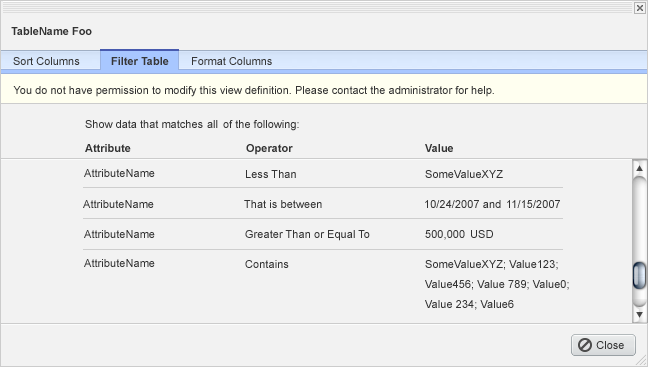
<style>
.page{position:relative;width:648px;height:367px;background:#f2f2f2}
.page>*{position:absolute;margin:0}
.t1{font:11px "Arial-BoldMT";color:#333333}
.t2{font:11px "ArialMT";color:#363636}
.t3{font:11px "Arial-BoldMT";color:#363636}
.t4{font:11px "ArialMT";color:#333333}
.t5{font:11px "ArialMT";letter-spacing:0.005em;color:#333333}
.t6{font:11px/20px "ArialMT";letter-spacing:0.005em;color:#333333}
</style>
<div class="page">
<p class="t1" style="left:11px;top:27px;width:81px;height:8px">TableName Foo</p>
<p class="t2" style="left:13px;top:57px;width:67px;height:8px">Sort Columns</p>
<p class="t3" style="left:111px;top:57px;width:58px;height:8px">Filter Table</p>
<p class="t2" style="left:192px;top:57px;width:80px;height:8px">Format Columns</p>
<p class="t4" style="left:13px;top:86px;width:481px;height:11px">You do not have permission to modify this view definition. Please contact the administrator for help.</p>
<p class="t1" style="left:85px;top:144px;width:46px;height:8px">Attribute</p>
<p class="t1" style="left:246px;top:144px;width:47px;height:11px">Operator</p>
<p class="t1" style="left:425px;top:144px;width:28px;height:8px">Value</p>
<p class="t5" style="left:84px;top:169px;width:71px;height:8px">AttributeName</p>
<p class="t5" style="left:246px;top:170px;width:50px;height:8px">Less Than</p>
<p class="t5" style="left:425px;top:170px;width:78px;height:8px">SomeValueXYZ</p>
<p class="t5" style="left:83px;top:200px;width:71px;height:8px">AttributeName</p>
<p class="t5" style="left:244px;top:200px;width:78px;height:8px">That is between</p>
<p class="t5" style="left:425px;top:200px;width:76px;height:8px">10/24/2007 and</p>
<p class="t5" style="left:507px;top:200px;width:53px;height:8px">11/15/2007</p>
<p class="t5" style="left:84px;top:230px;width:71px;height:8px">AttributeName</p>
<p class="t5" style="left:245px;top:230px;width:125px;height:11px">Greater Than or Equal To</p>
<p class="t5" style="left:425px;top:230px;width:40px;height:10px">500,000</p>
<p class="t5" style="left:471px;top:230px;width:22px;height:8px">USD</p>
<p class="t5" style="left:84px;top:259px;width:71px;height:8px">AttributeName</p>
<p class="t5" style="left:245px;top:260px;width:44px;height:8px">Contains</p>
<p class="t6" style="left:425px;top:260px;width:144px;height:50px">SomeValueXYZ; Value123;<br>Value456; Value 789; Value0;<br>Value 234; Value6</p>
<p class="t4" style="left:596px;top:341px;width:28px;height:8px">Close</p>
</div>
